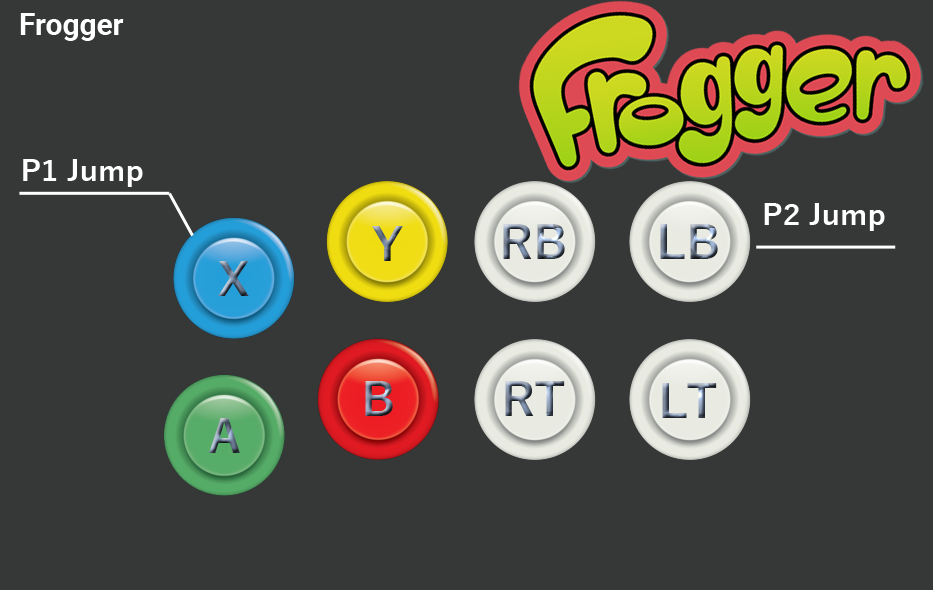
<style>
.page{position:relative;width:933px;height:590px;background:#363838}
.page>*{position:absolute;margin:0}
.t1{font:30px "Roboto-Bold";color:#ffffff}
.t2{font:30px "YuGothic-Bold";color:#ffffff}
</style>
<div class="page">
<p class="t1" style="left:20px;top:13px;width:104px;height:28px">Frogger</p>
<p class="t2" style="left:23px;top:159px;width:120px;height:28px">P1 Jump</p>
<p class="t2" style="left:764px;top:203px;width:121px;height:28px">P2 Jump</p>
</div>
